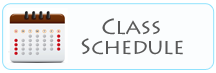
<style>
.page{position:relative;width:216px;height:73px;background:#fbfdfe}
.page>*{position:absolute;margin:0}
.t1{font:22px "LithosPro-Regular";letter-spacing:-0.025em;color:#595959}
</style>
<div class="page">
<p class="t1" style="left:102px;top:18px;width:58px;height:17px">Class</p>
<p class="t1" style="left:81px;top:38px;width:102px;height:17px">Schedule</p>
</div>
